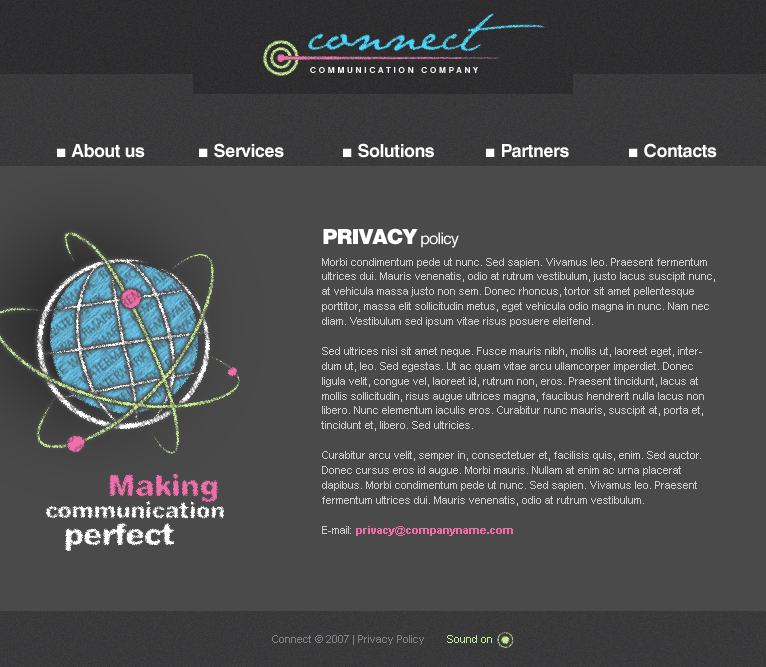
<style>
.page{position:relative;width:766px;height:667px;background:#4b4a4b}
.page>*{position:absolute;margin:0}
.t1{font:53.2px "JaneAusten"}
.t2{font:8px "Swiss721BT-Bold";letter-spacing:0.34em;color:#ffffff;text-transform:uppercase}
.t3{font:18px "Swiss721BT-Bold";letter-spacing:-0.025em;color:#ffffff}
.t4{font:18px "ArialMT";color:#ffffff}
.t5{font:21px "Swiss721BT-Black";letter-spacing:-0.05em;color:#ffffff;text-transform:uppercase}
.t6{font:16px "Swiss721BT-Roman";letter-spacing:-0.05em;color:#ffffff}
.t7{font:11px/14.9px "ArialMT";color:#cdcdcd}
.t8{font:11px/14.9px "Arial-BoldMT";color:#f06eaa}
.t9{font:22.2px/22.7px "Swiss721BT-BlackRounded";letter-spacing:-0.025em;color:#ffffff}
.t10{font:29.4px/24.9px "Swiss721BT-BlackRounded";letter-spacing:-0.025em;color:#c9ed92}
.t11{font:29.4px/24.9px "Swiss721BT-BlackRounded";letter-spacing:-0.025em;color:#f06eaa}
.t12{font:30.3px/27.1px "Swiss721BT-BlackRounded";letter-spacing:-0.025em;color:#ffffff}
.t13{font:11px "ArialMT";color:#848484}
.t14{font:11px "ArialMT";color:#c9ed92}
</style>
<div class="page">
<p class="t1" style="left:308px;top:13px;width:237px;height:39px">connect</p>
<p class="t2" style="left:310px;top:67px;width:168px;height:6px">Communication company</p>
<p class="t3" style="left:57px;top:144px;width:88px;height:14px"><span class="t4">■ </span>About us</p>
<p class="t3" style="left:199px;top:143px;width:85px;height:15px"><span class="t4">■ </span>Services</p>
<p class="t3" style="left:343px;top:143px;width:91px;height:15px"><span class="t4">■ </span>Solutions</p>
<p class="t3" style="left:486px;top:144px;width:83px;height:14px"><span class="t4">■ </span>Partners</p>
<p class="t3" style="left:629px;top:143px;width:88px;height:15px"><span class="t4">■ </span>Contacts</p>
<p class="t5" style="left:323px;top:228px;width:136px;height:20px">Privacy <span class="t6">policy</span></p>
<p class="t7" style="left:321px;top:258px;width:394px;height:278px">Morbi condimentum pede ut nunc. Sed sapien. Vivamus leo. Praesent fermentum ultrices dui. Mauris venenatis, odio at rutrum vestibulum, justo lacus suscipit nunc, at vehicula massa justo non sem. Donec rhoncus, tortor sit amet pellentesque porttitor, massa elit sollicitudin metus, eget vehicula odio magna in nunc. Nam nec diam. Vestibulum sed ipsum vitae risus posuere eleifend. <br><br>Sed ultrices nisi sit amet neque. Fusce mauris nibh, mollis ut, laoreet eget, interdum ut, leo. Sed egestas. Ut ac quam vitae arcu ullamcorper imperdiet. Donec ligula velit, congue vel, laoreet id, rutrum non, eros. Praesent tincidunt, lacus at mollis sollicitudin, risus augue ultrices magna, faucibus hendrerit nulla lacus non libero. Nunc elementum iaculis eros. Curabitur nunc mauris, suscipit at, porta et, tincidunt et, libero. Sed ultricies. <br><br>Curabitur arcu velit, semper in, consectetuer et, facilisis quis, enim. Sed auctor. Donec cursus eros id augue. Morbi mauris. Nullam at enim ac urna placerat dapibus. Morbi condimentum pede ut nunc. Sed sapien. Vivamus leo. Praesent fermentum ultrices dui. Mauris venenatis, odio at rutrum vestibulum.<br><br>E-mail: <span class="t8">privacy@companyname.com<br></span>, justo lacus suscipit nunc, at vehicula massa justo non sem. Donec rhoncus, tortor sit amet pellentesque porttitor, massa elit sollicitudin metus, eget vehicula odio magna in nunc. Nam nec diam. Vestibulum sed ipsum vitae risus posuere eleifend. <br><br>Sed ultrices nisi sit amet neque. Fusce mauris nibh, mollis ut, laoreet eget, interdum ut, leo. Sed egestas. Ut ac quam vitae arcu ullamcorper imperdiet. Donec ligula velit, congue vel, laoreet id, rutrum non, eros. Praesent tincidunt, lacus at mollis sollicitudin, risus augue ultrices magna, faucibus hendrerit nulla lacus non libero. Nunc elementum iaculis eros. Curabitur nunc mauris, suscipit at, porta et, tincidunt et, libero. Sed ultricies.</p>
<p class="t9" style="left:45px;top:473px;width:179px;height:79px"><span class="t10">       </span><span class="t11">Making <br></span>communication<br>  <span class="t12">perfect</span></p>
<p class="t13" style="left:272px;top:635px;width:152px;height:10px">Connect © 2007 | Privacy Policy</p>
<p class="t14" style="left:447px;top:635px;width:45px;height:8px">Sound on</p>
</div>
